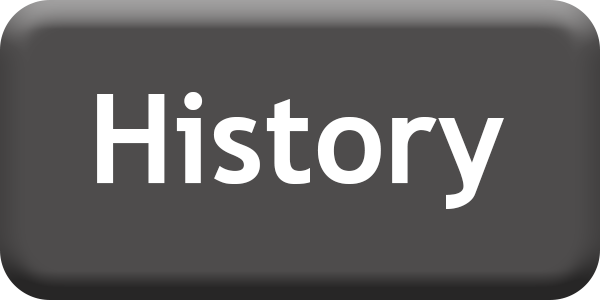
<style>
.page{position:relative;width:600px;height:300px;background:#4e4c4c}
.page>*{position:absolute;margin:0}
.t1{font:125px "TrebuchetMS-Bold";color:#ffffff}
</style>
<div class="page">
<p class="t1" style="left:97px;top:92px;width:407px;height:117px">History</p>
</div>
